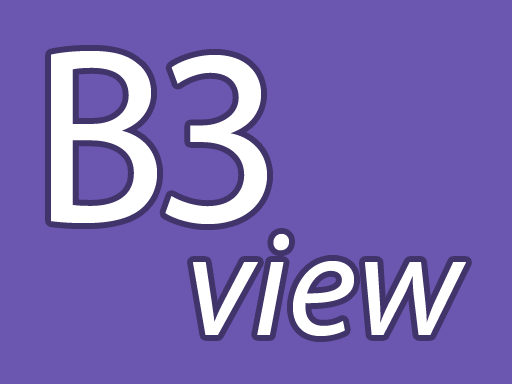
<style>
.page{position:relative;width:512px;height:384px;background:#6c57b0}
.page>*{position:absolute;margin:0}
.t1{font:250px "MyriadPro-Regular";letter-spacing:-0.05em;color:#ffffff}
.t2{font:150px "MyriadPro-It";color:#ffffff}
</style>
<div class="page">
<p class="t1" style="left:51px;top:51px;width:216px;height:173px">B3</p>
<p class="t2" style="left:193px;top:233px;width:273px;height:103px">view</p>
</div>
